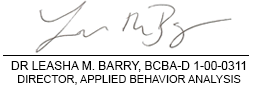
<style>
.page{position:relative;width:253px;height:90px;background:#ffffff}
.page>*{position:absolute;margin:0}
.t1{font:12px "ArialMT";color:#000000}
.t2{font:11px "ArialMT";color:#000000}
</style>
<div class="page">
<p class="t1" style="left:11px;top:61px;width:235px;height:24px;text-align:center">DR LEASHA M. BARRY, BCBA-D 1-00-0311<br><span class="t2">DIRECTOR, APPLIED BEHAVIOR ANALYSIS</span></p>
</div>
